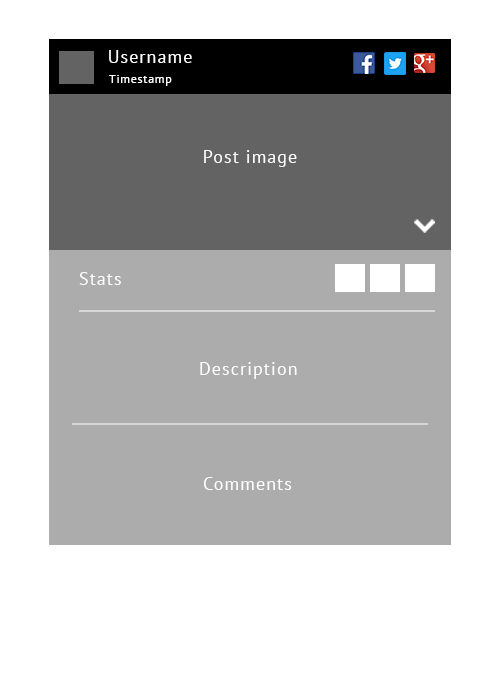
<style>
.page{position:relative;width:500px;height:688px;background:#ffffff}
.page>*{position:absolute;margin:0}
.t1{font:18px "PTSans-Regular";letter-spacing:0.06em;color:#ffffff}
.t2{font:12px "PTSans-Regular";letter-spacing:0.06em;color:#ffffff}
</style>
<div class="page">
<p class="t1" style="left:109px;top:50px;width:83px;height:13px">Username</p>
<p class="t2" style="left:109px;top:75px;width:63px;height:11px">Timestamp</p>
<p class="t1" style="left:204px;top:150px;width:93px;height:17px">Post image</p>
<p class="t1" style="left:79px;top:272px;width:42px;height:13px">Stats</p>
<p class="t1" style="left:200px;top:362px;width:97px;height:17px">Description</p>
<p class="t1" style="left:203px;top:477px;width:89px;height:13px">Comments</p>
</div>
